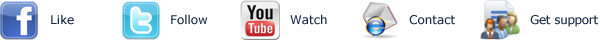
<style>
.page{position:relative;width:600px;height:40px;background:#ffffff}
.page>*{position:absolute;margin:0}
.t1{font:12px "Verdana";color:#182945}
.t2{font:12px "Verdana";letter-spacing:-0.025em;color:#182945}
</style>
<div class="page">
<p class="t1" style="left:51px;top:14px;width:23px;height:11px">Like</p>
<p class="t1" style="left:171px;top:14px;width:37px;height:11px">Follow</p>
<p class="t1" style="left:290px;top:14px;width:37px;height:11px">Watch</p>
<p class="t1" style="left:409px;top:15px;width:46px;height:10px">Contact</p>
<p class="t2" style="left:530px;top:15px;width:68px;height:12px">Get support</p>
</div>
